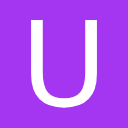
<style>
.page{position:relative;width:128px;height:128px;background:#a435f0}
.page>*{position:absolute;margin:0}
.t1{font:118px "DejaVuSans";color:#ffffff}
</style>
<div class="page">
<p class="t1" style="left:31px;top:19px;width:66px;height:89px">U</p>
</div>
